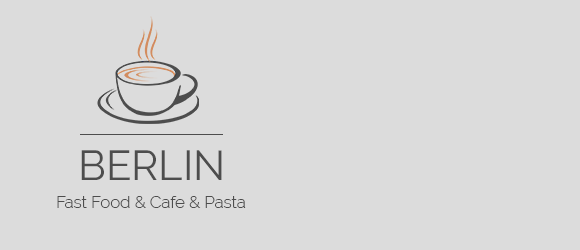
<style>
.page{position:relative;width:580px;height:250px;background:#dcdcdc}
.page>*{position:absolute;margin:0}
.t1{font:41.7px "Raleway-Regular";color:#4d4d4d}
.t2{font:16.7px "Raleway-Light";color:#4d4d4d}
</style>
<div class="page">
<p class="t1" style="left:81px;top:150px;width:141px;height:30px">BERLIN</p>
<p class="t2" style="left:57px;top:196px;width:189px;height:12px">Fast Food &amp; Cafe &amp; Pasta</p>
</div>
